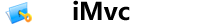
<style>
.page{position:relative;width:200px;height:25px;background:#ffffff}
.page>*{position:absolute;margin:0}
.t1{font:24px "MicrosoftYaHei-Bold";color:#000000}
</style>
<div class="page">
<p class="t1" style="left:73px;top:0px;width:57px;height:21px">iMvc</p>
</div>
